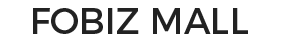
<style>
.page{position:relative;width:281px;height:42px;background:#ffffff}
.page>*{position:absolute;margin:0}
.t1{font:36px "Montserrat-Regular";color:#222222}
</style>
<div class="page">
<p class="t1" style="left:33px;top:8px;width:215px;height:26px">FOBIZ MALL</p>
</div>
